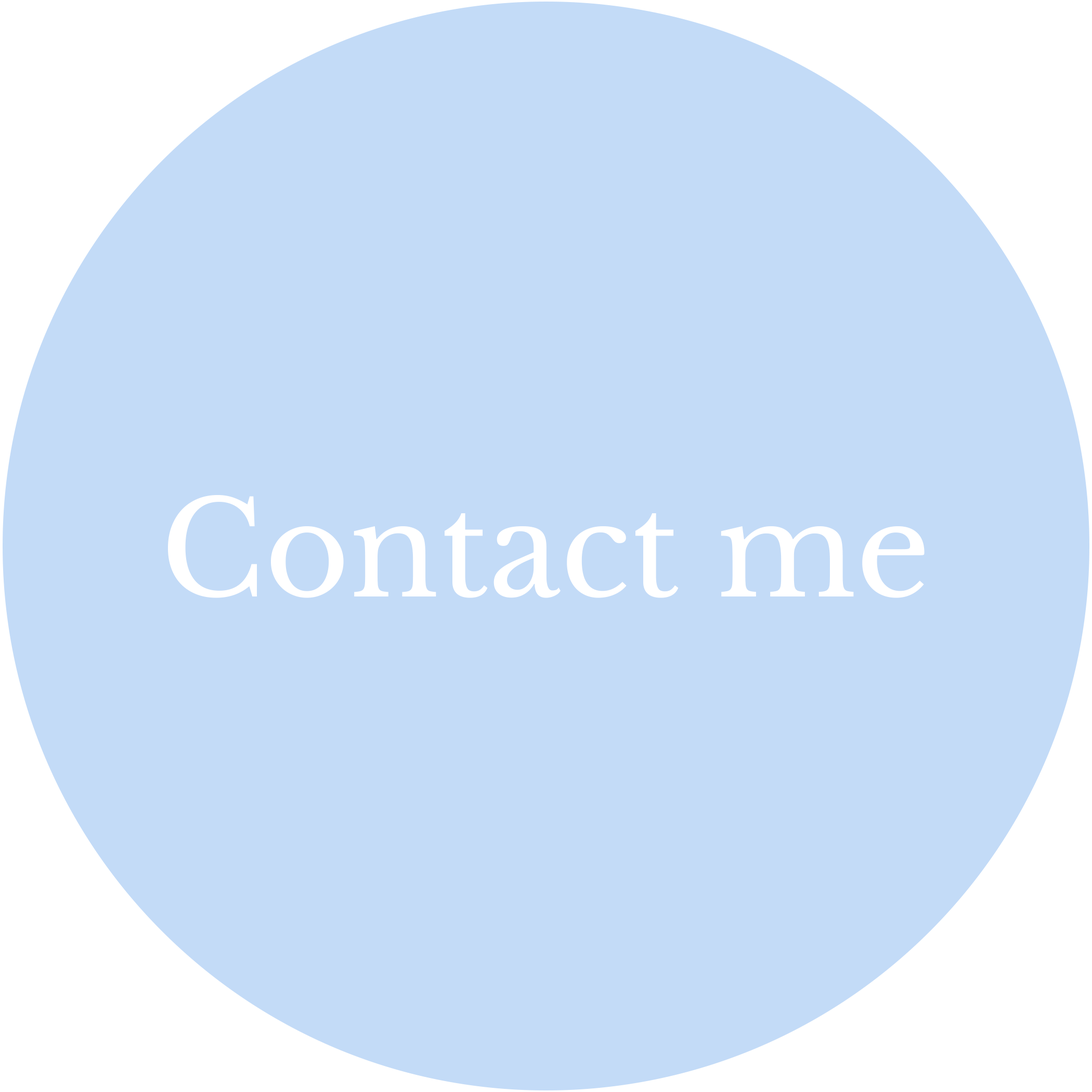
<style>
.page{position:relative;width:1092px;height:1092px;background:#c3dbf7}
.page>*{position:absolute;margin:0}
.t1{font:130px "LibreBaskerville-Regular";color:#ffffff}
</style>
<div class="page">
<p class="t1" style="left:168px;top:495px;width:757px;height:103px">Contact me</p>
</div>
